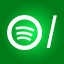
<style>
.page{position:relative;width:64px;height:64px;background:#007b17}
.page>*{position:absolute;margin:0}
.t1{font:45px "Helvetica-LightOblique";letter-spacing:0.004em;color:#ffffff}
</style>
<div class="page">
<p class="t1" style="left:46px;top:15px;width:11px;height:33px">I</p>
</div>
